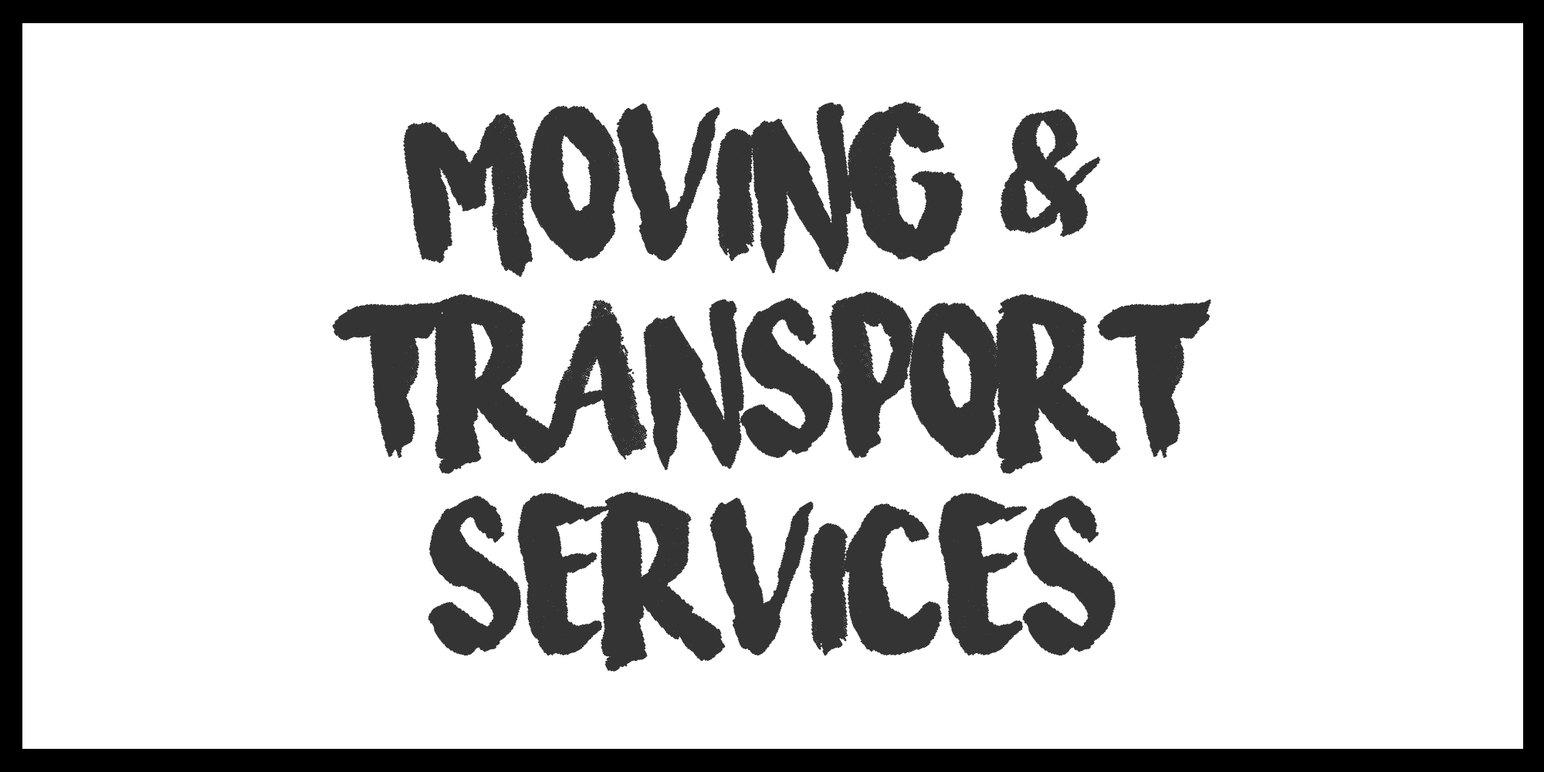
<style>
.page{position:relative;width:1544px;height:772px;background:#ffffff}
.page>*{position:absolute;margin:0}
.t1{font:164.4px "SurfingCapital";color:#343434}
</style>
<div class="page">
<p class="t1" style="left:333px;top:102px;width:878px;height:569px;text-align:center">MOVING &amp; <br>TRANSPORT<br>SERVICES</p>
</div>
